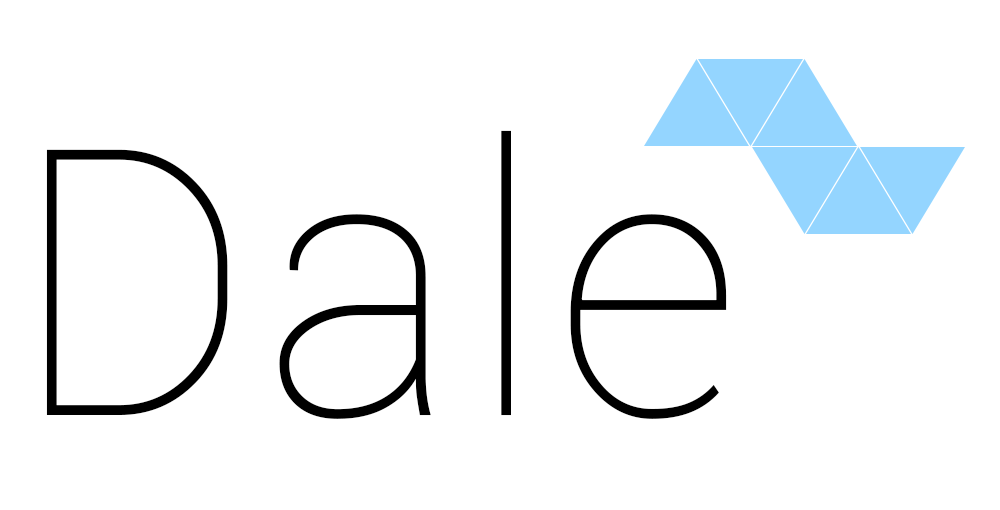
<style>
.page{position:relative;width:1000px;height:510px;background:#ffffff}
.page>*{position:absolute;margin:0}
.t1{font:373.4px "Roboto-Thin";letter-spacing:0.03em;color:#000000}
</style>
<div class="page">
<p class="t1" style="left:46px;top:130px;width:681px;height:289px">Dale</p>
</div>
